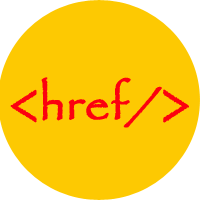
<style>
.page{position:relative;width:200px;height:200px;background:#fdc902}
.page>*{position:absolute;margin:0}
.t1{font:50px "Papyrus-Regular";color:#fc010f;font-weight:bold}
</style>
<div class="page">
<p class="t1" style="left:10px;top:77px;width:179px;height:51px">&lt;href/&gt;</p>
</div>
